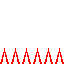
<style>
.page{position:relative;width:64px;height:64px;background:#ffffff}
.page>*{position:absolute;margin:0}
.t1{font:27px "LucidaConsole";color:#ff0000;scale:0.67 1}
</style>
<div class="page">
<p class="t1" style="left:0px;top:48px;width:64px;height:16px">^^^^^^</p>
</div>
